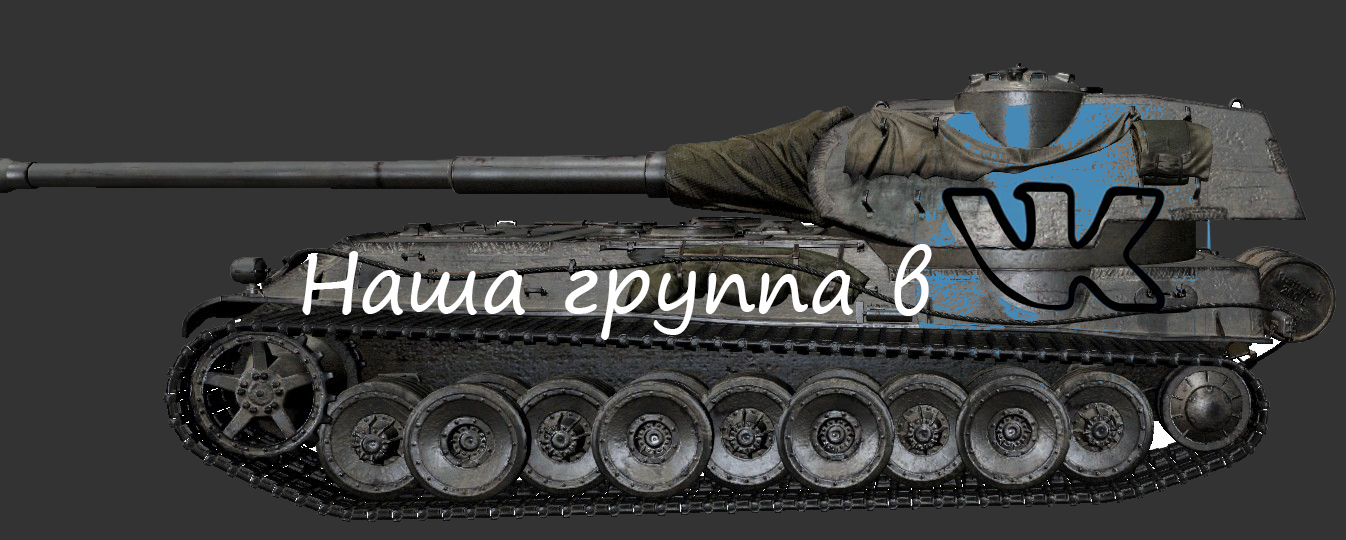
<style>
.page{position:relative;width:1346px;height:540px;background:#333333}
.page>*{position:absolute;margin:0}
.t1{font:81.3px "SegoePrint";color:#fefefe}
</style>
<div class="page">
<p class="t1" style="left:302px;top:244px;width:630px;height:96px">Наша группа в</p>
</div>
